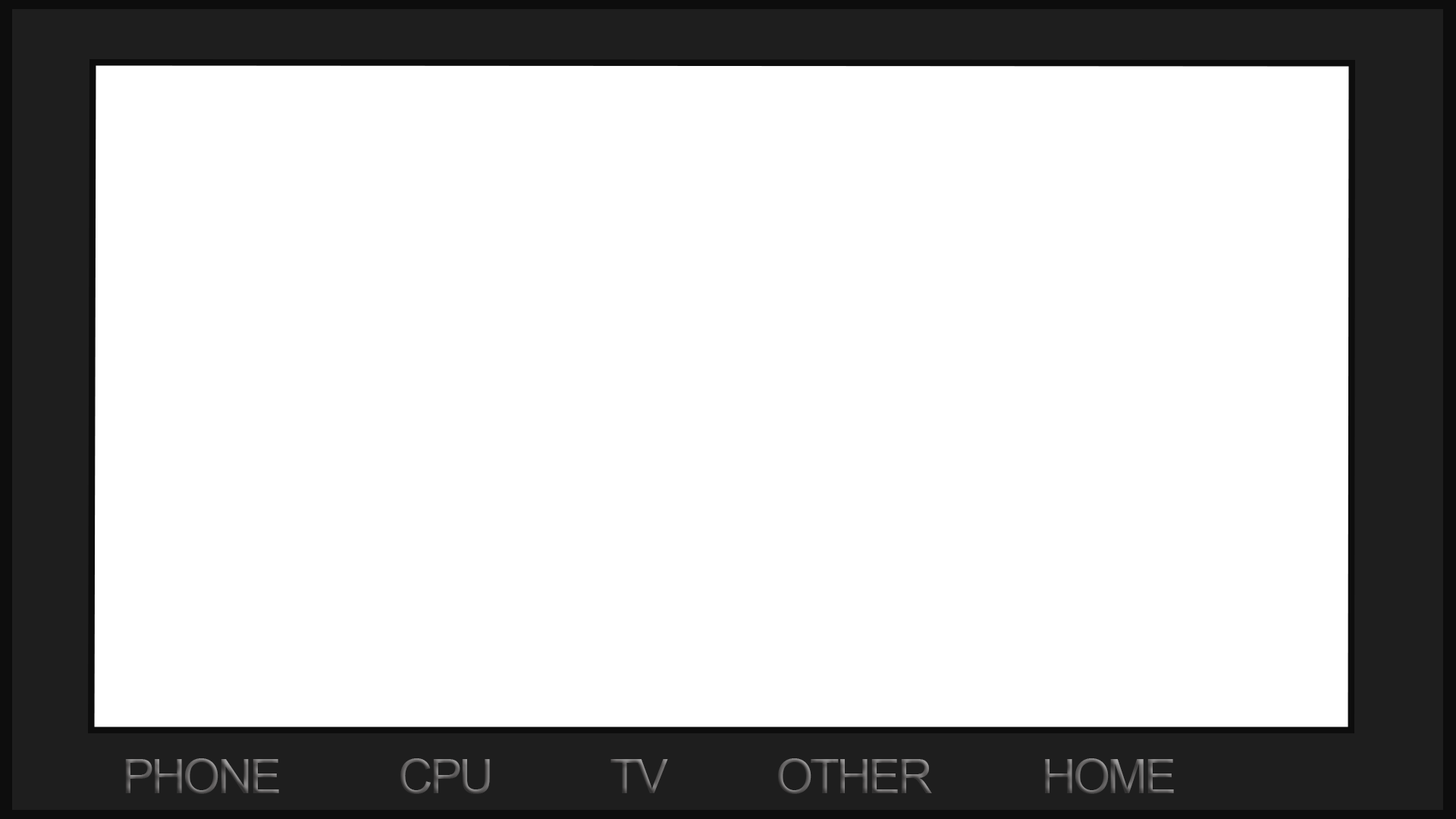
<style>
.page{position:relative;width:1456px;height:819px;background:#ffffff}
.page>*{position:absolute;margin:0}
.t1{font:47.4px "ArialMT";letter-spacing:-0.05em}
</style>
<div class="page">
<p class="t1" style="left:125px;top:758px;width:154px;height:36px">PHONE</p>
<p class="t1" style="left:400px;top:758px;width:90px;height:36px">CPU</p>
<p class="t1" style="left:610px;top:759px;width:58px;height:34px">TV</p>
<p class="t1" style="left:778px;top:758px;width:154px;height:36px">OTHER</p>
<p class="t1" style="left:1045px;top:758px;width:129px;height:36px">HOME</p>
</div>
